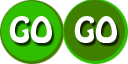
<style>
.page{position:relative;width:128px;height:64px;background:#ffffff}
.page>*{position:absolute;margin:0}
.t1{font:32px "HoboStd";color:#ffffff}
</style>
<div class="page">
<p class="t1" style="left:9px;top:16px;width:43px;height:27px">GO</p>
<p class="t1" style="left:74px;top:16px;width:43px;height:27px">GO</p>
</div>
